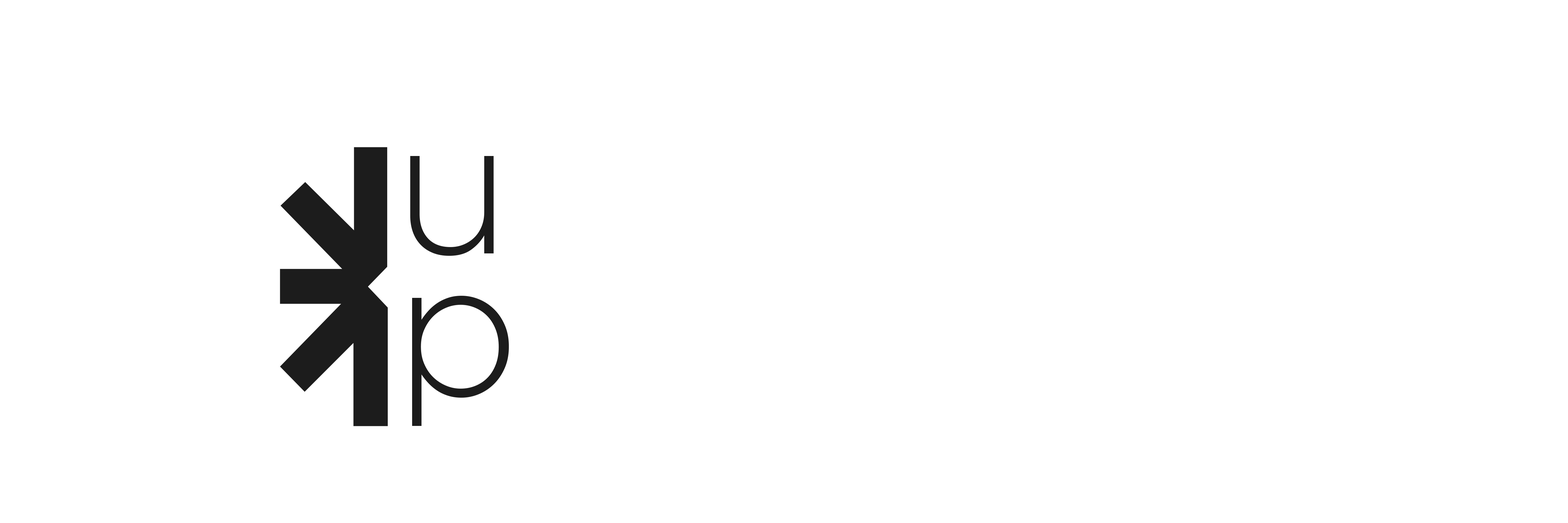
<style>
.page{position:relative;width:1568px;height:523px;background:#ffffff}
.page>*{position:absolute;margin:0}
.t1{font:190.8px/141.7px "Gotham-Light";letter-spacing:0.06em;color:#1c1c1c}
</style>
<div class="page">
<p class="t1" style="left:410px;top:156px;width:99px;height:270px">u<br>p</p>
</div>
